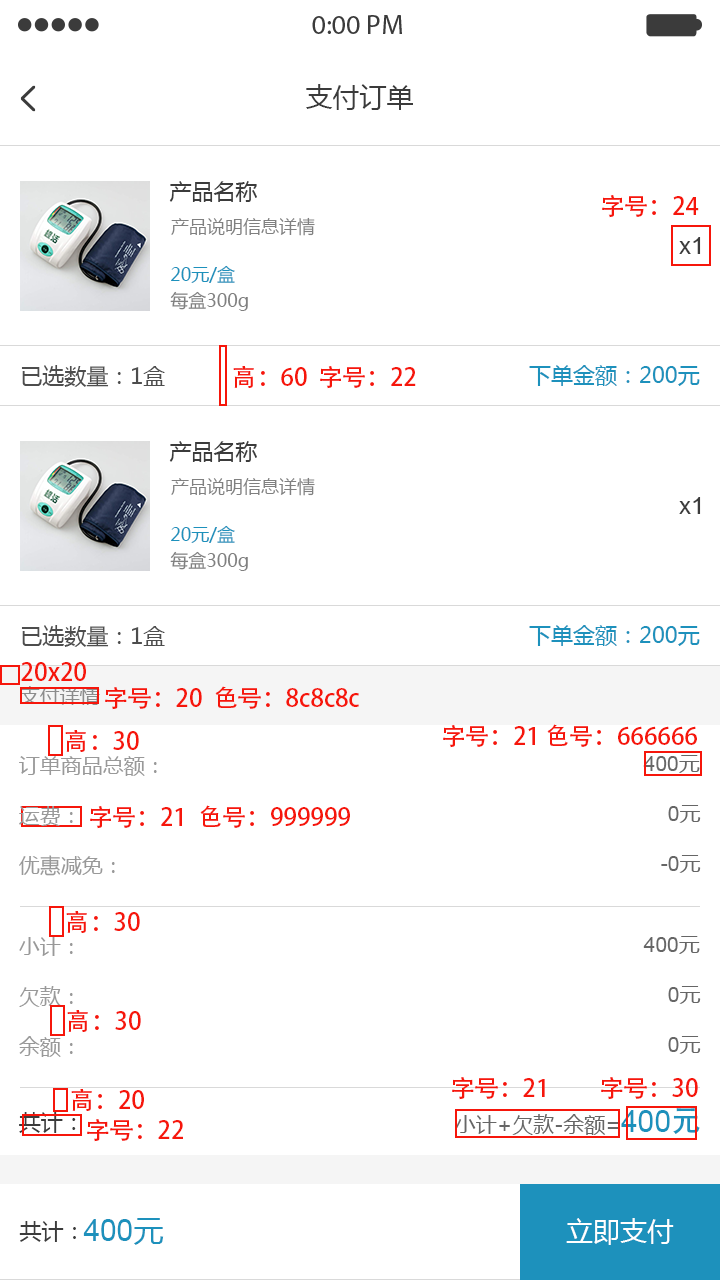
<style>
.page{position:relative;width:720px;height:1280px;background:#ffffff}
.page>*{position:absolute;margin:0}
.t1{font:27px "MicrosoftYaHei";color:#3b3b3b}
.t2{font:22px "MicrosoftYaHei";color:#3b3b3b}
.t3{font:24px "AdobeHeitiStd-Regular";color:#f6160b}
.t4{font:18px "MicrosoftYaHei";color:#808080}
.t5{font:24px "ArialMT";color:#3b3b3b}
.t6{font:18px/26px "MicrosoftYaHei";color:#808080}
.t7{font:18px/26px "MicrosoftYaHei";color:#1d91bc}
.t8{font:22px "MicrosoftYaHei";color:#4d4d4d}
.t9{font:22px "MicrosoftYaHei";color:#1d91bc}
.t10{font:20px "MicrosoftYaHei";color:#8c8c8c}
.t11{font:21px "MicrosoftYaHei";color:#999999}
.t12{font:21px "ArialMT";color:#666666}
.t13{font:21px "MicrosoftYaHei";color:#666666}
.t14{font:30px "ArialMT";color:#1d91bc}
.t15{font:30px "AdobeHeitiStd-Regular";color:#1d91bc}
.t16{font:30px "MicrosoftYaHei";color:#1d91bc}
.t17{font:27px "MicrosoftYaHei";color:#ffffff}
</style>
<div class="page">
<p class="t1" style="left:306px;top:84px;width:107px;height:26px">支付订单</p>
<p class="t2" style="left:169px;top:181px;width:88px;height:21px">产品名称</p>
<p class="t3" style="left:602px;top:195px;width:97px;height:23px">字号：24</p>
<p class="t4" style="left:171px;top:217px;width:144px;height:19px">产品说明信息详情</p>
<p class="t5" style="left:679px;top:237px;width:22px;height:17px">x1</p>
<p class="t6" style="left:170px;top:265px;width:78px;height:46px"><span class="t7">20元/盒<br></span>每盒300g</p>
<p class="t8" style="left:21px;top:365px;width:144px;height:22px">已选数量：1盒</p>
<p class="t3" style="left:233px;top:366px;width:183px;height:23px">高：60  字号：22</p>
<p class="t9" style="left:529px;top:365px;width:171px;height:21px">下单金额：200元</p>
<p class="t2" style="left:169px;top:441px;width:88px;height:21px">产品名称</p>
<p class="t4" style="left:171px;top:477px;width:144px;height:19px">产品说明信息详情</p>
<p class="t5" style="left:679px;top:497px;width:22px;height:17px">x1</p>
<p class="t6" style="left:170px;top:525px;width:78px;height:46px"><span class="t7">20元/盒<br></span>每盒300g</p>
<p class="t8" style="left:21px;top:625px;width:144px;height:22px">已选数量：1盒</p>
<p class="t9" style="left:529px;top:625px;width:171px;height:21px">下单金额：200元</p>
<p class="t3" style="left:21px;top:662px;width:65px;height:19px">20x20</p>
<p class="t10" style="left:20px;top:686px;width:80px;height:19px">支付详情</p>
<p class="t3" style="left:105px;top:686px;width:254px;height:24px">字号：20  色号：8c8c8c</p>
<p class="t3" style="left:443px;top:724px;width:254px;height:24px">字号：21 色号：666666</p>
<p class="t3" style="left:65px;top:730px;width:74px;height:22px">高：30</p>
<p class="t11" style="left:19px;top:756px;width:138px;height:20px">订单商品总额：</p>
<p class="t12" style="left:643px;top:755px;width:57px;height:18px">400<span class="t13">元</span></p>
<p class="t11" style="left:19px;top:806px;width:54px;height:20px">运费：</p>
<p class="t3" style="left:90px;top:805px;width:260px;height:24px">字号：21  色号：999999</p>
<p class="t12" style="left:668px;top:805px;width:33px;height:18px">0<span class="t13">元</span></p>
<p class="t11" style="left:19px;top:855px;width:96px;height:21px">优惠减免：</p>
<p class="t12" style="left:661px;top:855px;width:40px;height:18px">-0<span class="t13">元</span></p>
<p class="t3" style="left:66px;top:911px;width:74px;height:22px">高：30</p>
<p class="t11" style="left:19px;top:937px;width:54px;height:19px">小计：</p>
<p class="t12" style="left:643px;top:936px;width:57px;height:18px">400<span class="t13">元</span></p>
<p class="t11" style="left:19px;top:986px;width:54px;height:21px">欠款：</p>
<p class="t12" style="left:668px;top:986px;width:33px;height:18px">0<span class="t13">元</span></p>
<p class="t3" style="left:67px;top:1010px;width:74px;height:22px">高：30</p>
<p class="t11" style="left:19px;top:1036px;width:54px;height:21px">余额：</p>
<p class="t12" style="left:668px;top:1036px;width:33px;height:18px">0<span class="t13">元</span></p>
<p class="t3" style="left:452px;top:1077px;width:93px;height:23px">字号：21</p>
<p class="t3" style="left:601px;top:1077px;width:97px;height:23px">字号：30</p>
<p class="t3" style="left:71px;top:1089px;width:73px;height:22px">高：20</p>
<p class="t13" style="left:455px;top:1108px;width:245px;height:27px">小计+欠款-余额=<span class="t14">400</span><span class="t15">元</span></p>
<p class="t2" style="left:19px;top:1112px;width:57px;height:21px">共计：</p>
<p class="t3" style="left:87px;top:1119px;width:96px;height:23px">字号：22</p>
<p class="t2" style="left:19px;top:1221px;width:57px;height:21px">共计：</p>
<p class="t14" style="left:83px;top:1218px;width:81px;height:27px">400<span class="t16">元</span></p>
<p class="t17" style="left:566px;top:1218px;width:108px;height:27px">立即支付</p>
</div>
